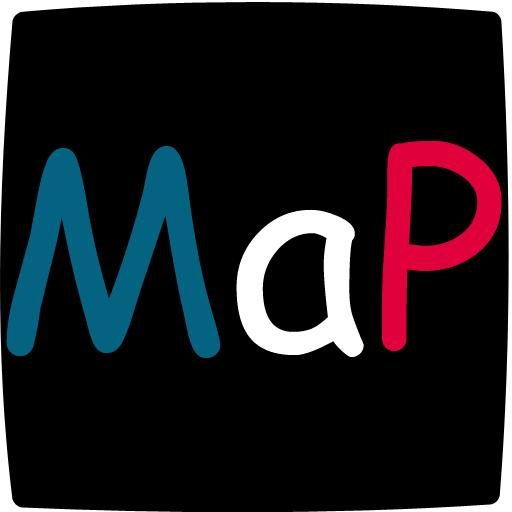
<style>
.page{position:relative;width:512px;height:512px;background:#000000}
.page>*{position:absolute;margin:0}
.t1{font:270px "ComicSansMS";color:#046380}
.t2{font:270px "ComicSansMS";color:#ffffff}
.t3{font:270px "ComicSansMS";color:#e0003c}
</style>
<div class="page">
<p class="t1" style="left:6px;top:140px;width:496px;height:218px">M<span class="t2">a</span><span class="t3">P</span></p>
</div>
